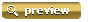
<style>
.page{position:relative;width:88px;height:22px;background:#ffffff}
.page>*{position:absolute;margin:0}
.t1{font:11px "Tahoma-Bold";color:#fefefe}
</style>
<div class="page">
<p class="t1" style="left:25px;top:6px;width:44px;height:10px">preview</p>
</div>
